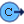
<style>
.page{position:relative;width:24px;height:24px;background:#ffffff}
.page>*{position:absolute;margin:0}
.t1{font:12.4px "BookmanOldStyle";color:#252526}
</style>
<div class="page">
<p class="t1" style="left:5px;top:8px;width:7px;height:8px">C</p>
</div>
